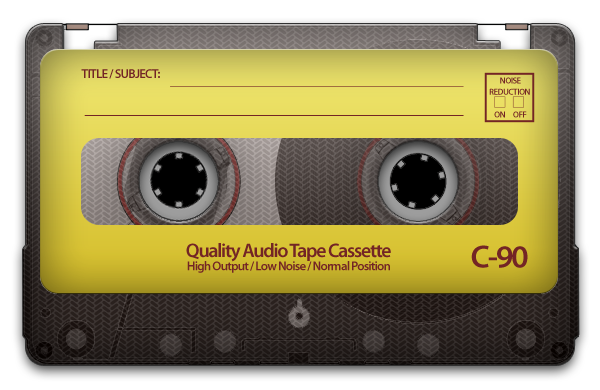
<style>
.page{position:relative;width:600px;height:390px}
.page>*{position:absolute;margin:0}
.t1{font:12.8px "MyriadPro-Semibold";letter-spacing:-0.06em;color:#732525}
.t2{font:8.8px/11.4px "MyriadPro-Semibold";letter-spacing:-0.06em;color:#732525}
.t3{font:19.6px "MyriadPro-Semibold";letter-spacing:-0.06em;color:#732525}
.t4{font:32.2px "MyriadPro-Semibold";letter-spacing:-0.06em;color:#732525}
.t5{font:12.9px "MyriadPro-Semibold";letter-spacing:-0.06em;color:#732525}
</style>
<div class="page">
<p class="t1" style="left:81px;top:69px;width:79px;height:10px">TITLE / SUBJECT:</p>
<p class="t2" style="left:489px;top:77px;width:41px;height:41px;text-align:center">NOISE<br>REDUCTION <br><br>ON      OFF</p>
<p class="t3" style="left:186px;top:243px;width:205px;height:19px">Quality Audio Tape Cassette</p>
<p class="t4" style="left:471px;top:245px;width:57px;height:23px">C-90</p>
<p class="t5" style="left:187px;top:261px;width:203px;height:12px">High Output / Low Noise / Normal Position</p>
</div>
